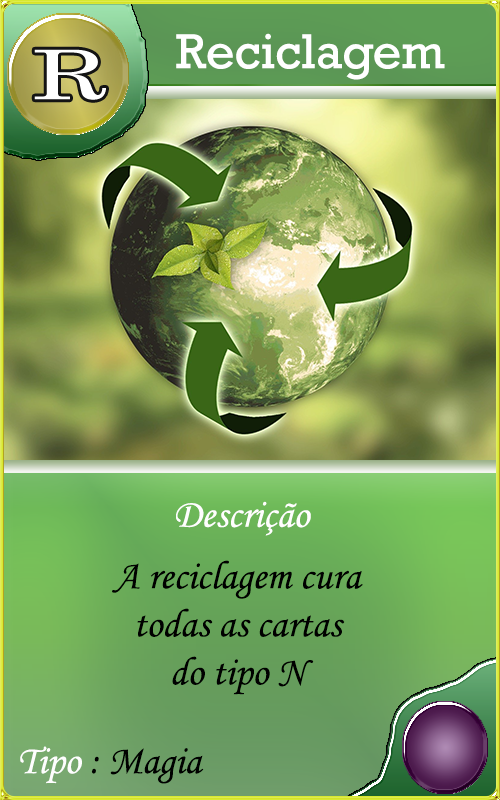
<style>
.page{position:relative;width:500px;height:800px}
.page>*{position:absolute;margin:0}
.t1{font:50px "Rockwell";color:#ffffff}
.t2{font:40px "MonotypeCorsiva";color:#fffefe}
.t3{font:40px "MonotypeCorsiva";color:#000000}
.t4{font:40px "MonotypeCorsiva";color:#fefefe}
</style>
<div class="page">
<p class="t1" style="left:176px;top:33px;width:269px;height:47px">Reciclagem</p>
<p class="t2" style="left:176px;top:501px;width:135px;height:35px">Descrição</p>
<p class="t3" style="left:112px;top:560px;width:251px;height:135px;text-align:center">A reciclagem cura<br> todas as cartas <br>do tipo N</p>
<p class="t3" style="left:20px;top:746px;width:184px;height:38px"><span class="t4">Tipo </span>: Magia</p>
</div>
